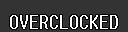
<style>
.page{position:relative;width:128px;height:32px;background:#333333}
.page>*{position:absolute;margin:0}
.t1{font:18px "Terminal";color:#ffffff}
</style>
<div class="page">
<p class="t1" style="left:10px;top:15px;width:108px;height:14px">OVERCLOCKED</p>
</div>
